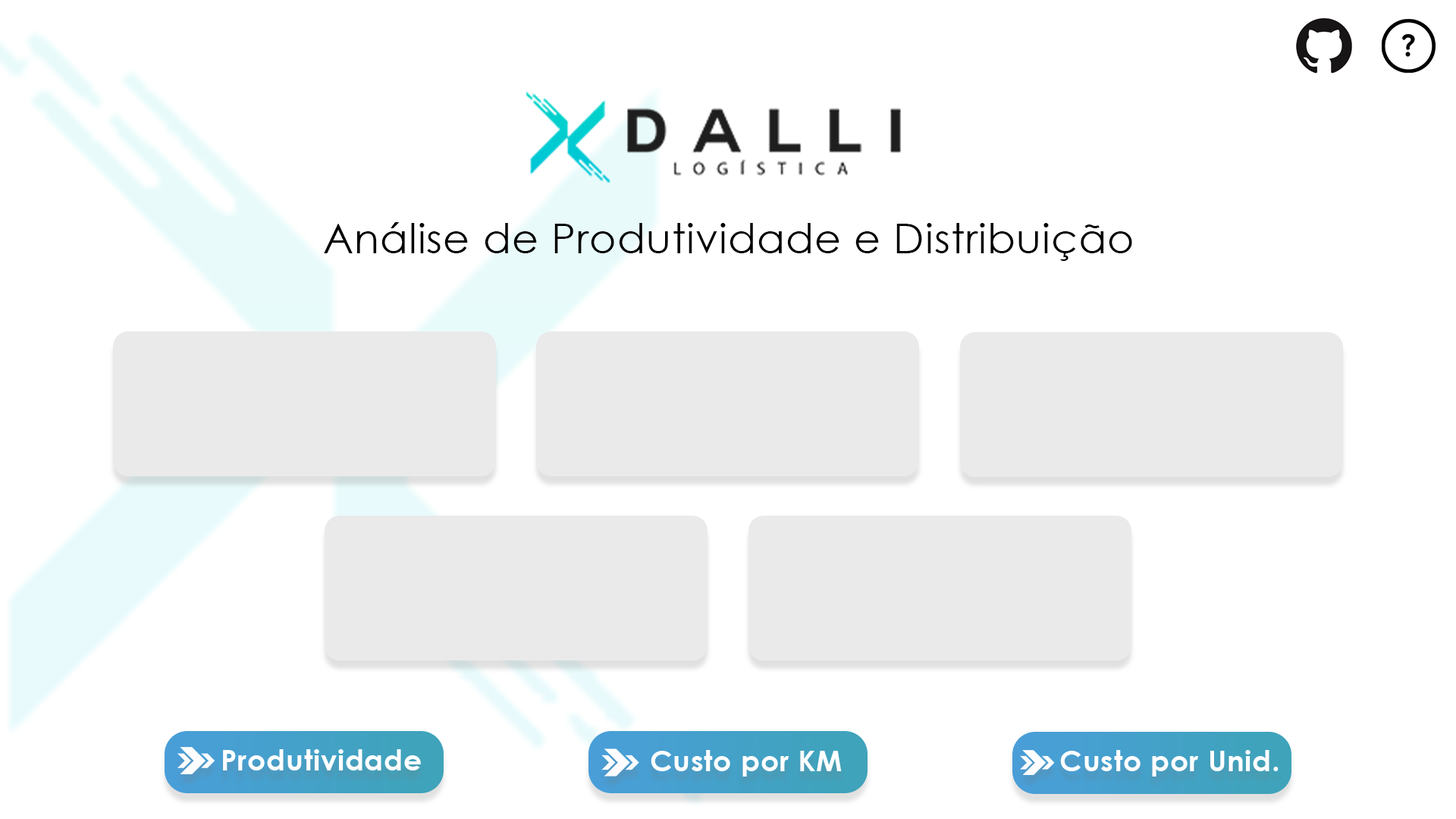
<style>
.page{position:relative;width:1456px;height:819px;background:#ffffff}
.page>*{position:absolute;margin:0}
.t1{font:40.9px "CenturyGothic";letter-spacing:0.02em;color:#000000}
.t2{font:28.8px "CenturyGothic-Bold";letter-spacing:0.02em;color:#ffffff}
</style>
<div class="page">
<p class="t1" style="left:324px;top:222px;width:808px;height:39px">Análise de Produtividade e Distribuição</p>
<p class="t2" style="left:223px;top:749px;width:198px;height:21px">Produtividade</p>
<p class="t2" style="left:651px;top:750px;width:191px;height:27px">Custo por KM</p>
<p class="t2" style="left:1060px;top:750px;width:219px;height:27px">Custo por Unid.</p>
</div>
